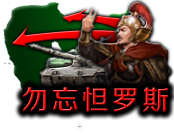
<style>
.page{position:relative;width:174px;height:140px;background:#ffffff}
.page>*{position:absolute;margin:0}
.t1{font:26.7px "FZZZHUNHJW--GB1-0";letter-spacing:0.13em}
</style>
<div class="page">
<p class="t1" style="left:23px;top:87px;width:145px;height:25px">勿忘怛罗斯</p>
</div>
